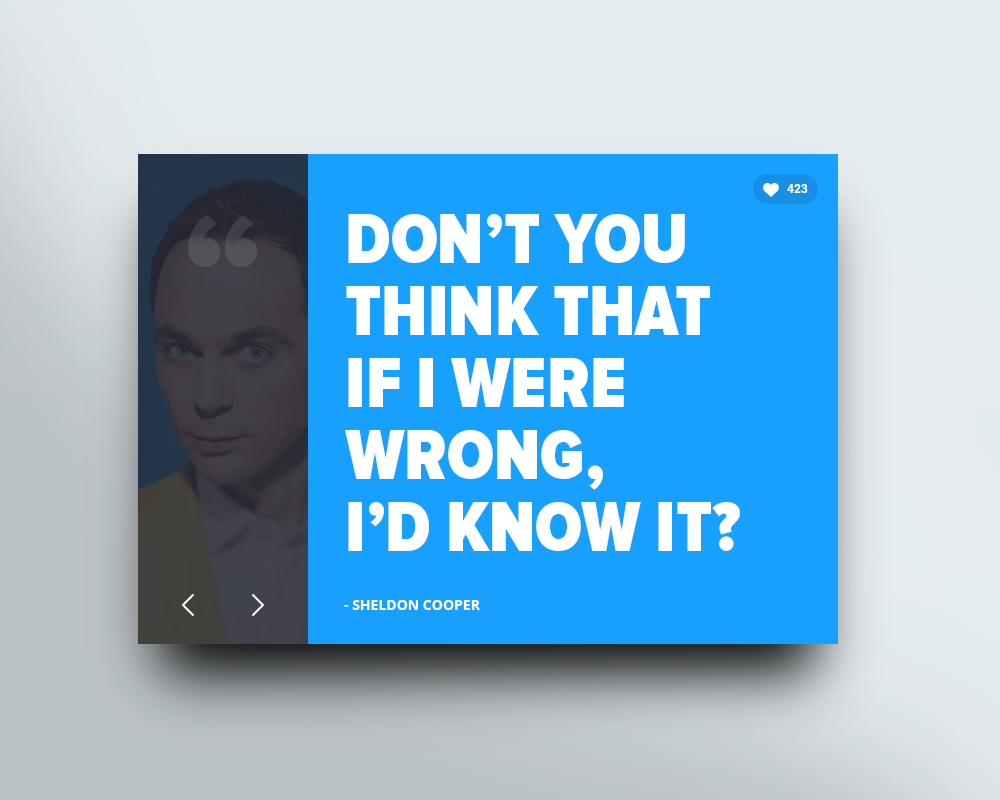
<style>
.page{position:relative;width:1000px;height:800px;background:#18a0ff}
.page>*{position:absolute;margin:0}
.t1{font:12px "Roboto-Bold";color:#ffffff}
.t2{font:72px/72px "ProximaNovaCond-Black";color:#feffff;text-transform:uppercase}
.t3{font:14px "OpenSans-Bold";color:#ffffff;text-transform:uppercase}
</style>
<div class="page">
<p class="t1" style="left:787px;top:184px;width:21px;height:9px">423</p>
<p class="t2" style="left:345px;top:214px;width:395px;height:337px">Don’t you <br>think that <br>if I were <br>wrong, <br>I’d know it?</p>
<p class="t3" style="left:344px;top:600px;width:136px;height:10px">- Sheldon Cooper</p>
</div>
